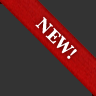
<style>
.page{position:relative;width:96px;height:96px;background:#333333}
.page>*{position:absolute;margin:0}
.t1{font:18px "Baskerville-Bold";letter-spacing:0.01em;color:#ffffff}
</style>
<div class="page">
<p class="t1" style="left:35px;top:16px;width:42px;height:43px;rotate:45deg">NEW!</p>
</div>
